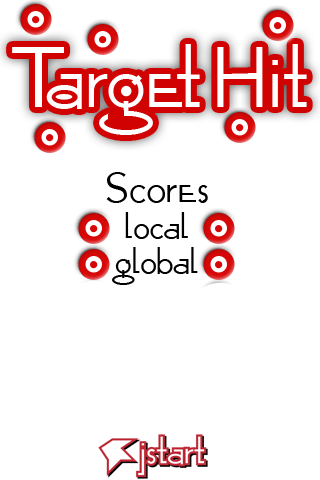
<style>
.page{position:relative;width:320px;height:480px;background:#ffffff}
.page>*{position:absolute;margin:0}
.t1{font:72px "OpticonOne1";color:#ffffff}
.t2{font:36px "OpticonOne1";color:#000000}
.t3{font:30px "OpticonOne1";color:#000000}
</style>
<div class="page">
<p class="t1" style="left:12px;top:44px;width:295px;height:91px">Target  Hit</p>
<p class="t2" style="left:106px;top:172px;width:102px;height:31px">Scores</p>
<p class="t3" style="left:125px;top:212px;width:63px;height:27px">local</p>
<p class="t3" style="left:112px;top:247px;width:86px;height:38px">global</p>
</div>
